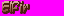
<style>
.page{position:relative;width:64px;height:16px;background:#ff00ff}
.page>*{position:absolute;margin:0}
.t1{font:14px "MightyZeo20"}
</style>
<div class="page">
<p class="t1" style="left:2px;top:1px;width:26px;height:11px">Elfir</p>
</div>
